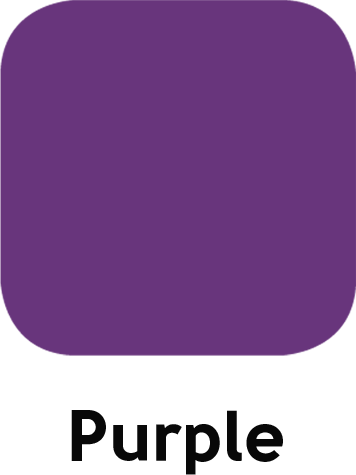
<style>
.page{position:relative;width:356px;height:475px;background:#68357c}
.page>*{position:absolute;margin:0}
.t1{font:72px "Solomon-Sans-Bold";color:#080808}
</style>
<div class="page">
<p class="t1" style="left:71px;top:410px;width:212px;height:65px">Purple</p>
</div>
